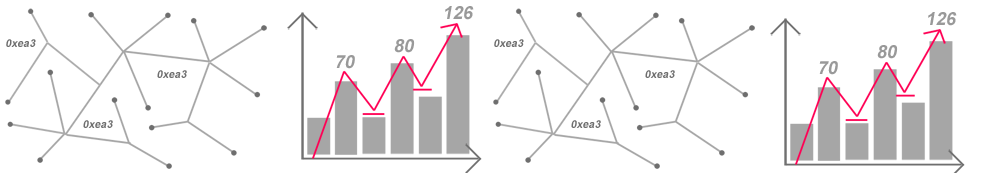
<style>
.page{position:relative;width:1000px;height:173px;background:#ffffff}
.page>*{position:absolute;margin:0}
.t1{font:18px "Arial-BoldMT";color:#999999;font-style:italic}
.t2{font:10.8px "Arial-BoldMT";color:#6e6e6e;font-style:italic}
</style>
<div class="page">
<p class="t1" style="left:445px;top:6px;width:29px;height:14px">126</p>
<p class="t1" style="left:928px;top:12px;width:29px;height:14px">126</p>
<p class="t2" style="left:6px;top:39px;width:30px;height:8px">0xea32</p>
<p class="t1" style="left:394px;top:39px;width:21px;height:14px">80</p>
<p class="t2" style="left:494px;top:39px;width:30px;height:8px">0xea32</p>
<p class="t1" style="left:877px;top:45px;width:21px;height:14px">80</p>
<p class="t1" style="left:336px;top:55px;width:19px;height:14px">70</p>
<p class="t1" style="left:819px;top:61px;width:19px;height:14px">70</p>
<p class="t2" style="left:157px;top:70px;width:30px;height:8px">0xea32</p>
<p class="t2" style="left:645px;top:70px;width:30px;height:8px">0xea32</p>
<p class="t2" style="left:83px;top:120px;width:30px;height:8px">0xea32</p>
<p class="t2" style="left:571px;top:120px;width:30px;height:8px">0xea32</p>
</div>
